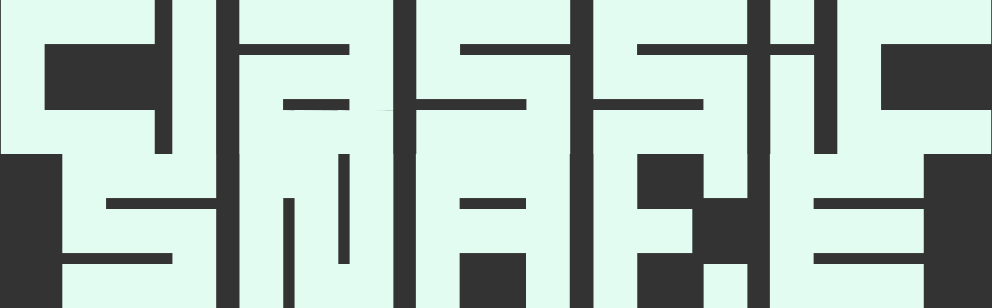
<style>
.page{position:relative;width:992px;height:308px;background:#e2fcf2}
.page>*{position:absolute;margin:0}
.t1{font:179.2px "block";color:#e2fcf2}
</style>
<div class="page">
<p class="t1" style="left:0px;top:0px;width:992px;height:154px">Classic</p>
<p class="t1" style="left:62px;top:154px;width:155px;height:154px">S</p>
<p class="t1" style="left:239px;top:154px;width:155px;height:154px">N</p>
<p class="t1" style="left:415px;top:154px;width:155px;height:154px">A</p>
<p class="t1" style="left:593px;top:154px;width:155px;height:154px">K</p>
<p class="t1" style="left:769px;top:154px;width:155px;height:154px">E</p>
</div>
